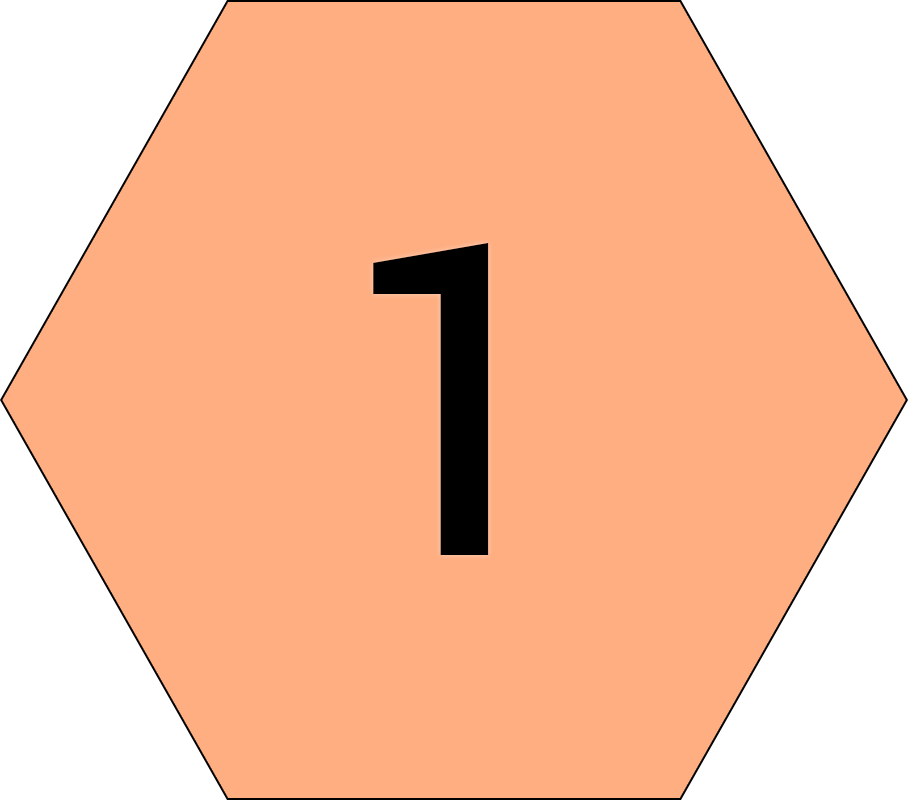
<style>
.page{position:relative;width:908px;height:800px;background:#ffae82}
.page>*{position:absolute;margin:0}
.t1{font:600px "BankGothicBT-Light";color:#000000}
</style>
<div class="page">
<p class="t1" style="left:373px;top:243px;width:116px;height:312px">1</p>
</div>
